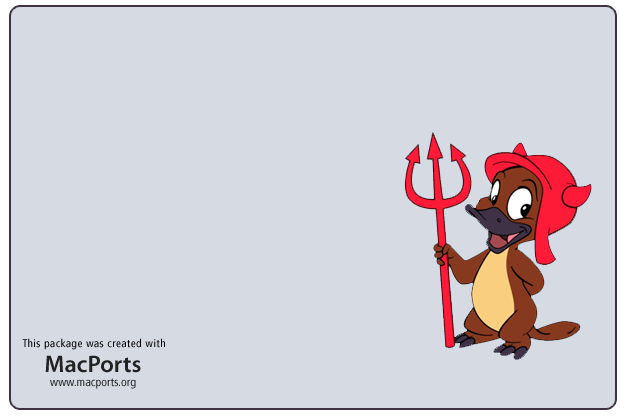
<style>
.page{position:relative;width:620px;height:418px;background:#d5dae3}
.page>*{position:absolute;margin:0}
.t1{font:11px "FrutigerLTStd-Cn";letter-spacing:0.05em;color:#000000}
.t2{font:24px "MyriadPro-Semibold";color:#222222}
.t3{font:12px "FrutigerLTStd-Cn";color:#222222}
</style>
<div class="page">
<p class="t1" style="left:22px;top:338px;width:143px;height:12px">This package was created with</p>
<p class="t2" style="left:45px;top:355px;width:96px;height:18px">MacPorts</p>
<p class="t3" style="left:50px;top:378px;width:86px;height:11px">www.macports.org</p>
</div>
